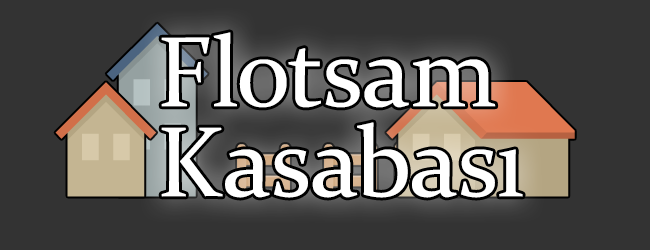
<style>
.page{position:relative;width:650px;height:250px;background:#333333}
.page>*{position:absolute;margin:0}
.t1{font:100px/90px "Constantia";color:#ffffff}
</style>
<div class="page">
<p class="t1" style="left:161px;top:32px;width:362px;height:166px">Flotsam<br>Kasabası</p>
</div>
